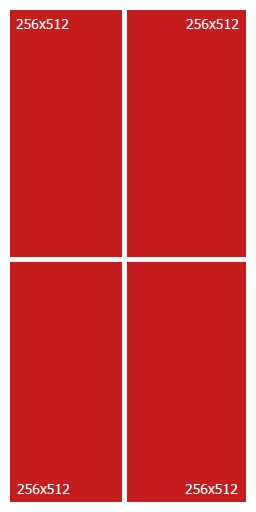
<style>
.page{position:relative;width:256px;height:512px;background:#c61e1e}
.page>*{position:absolute;margin:0}
.t1{font:14px "Tahoma";color:#ffffff}
</style>
<div class="page">
<p class="t1" style="left:16px;top:19px;width:53px;height:10px">256x512</p>
<p class="t1" style="left:186px;top:19px;width:53px;height:10px">256x512</p>
<p class="t1" style="left:17px;top:484px;width:53px;height:10px">256x512</p>
<p class="t1" style="left:185px;top:484px;width:53px;height:10px">256x512</p>
</div>
